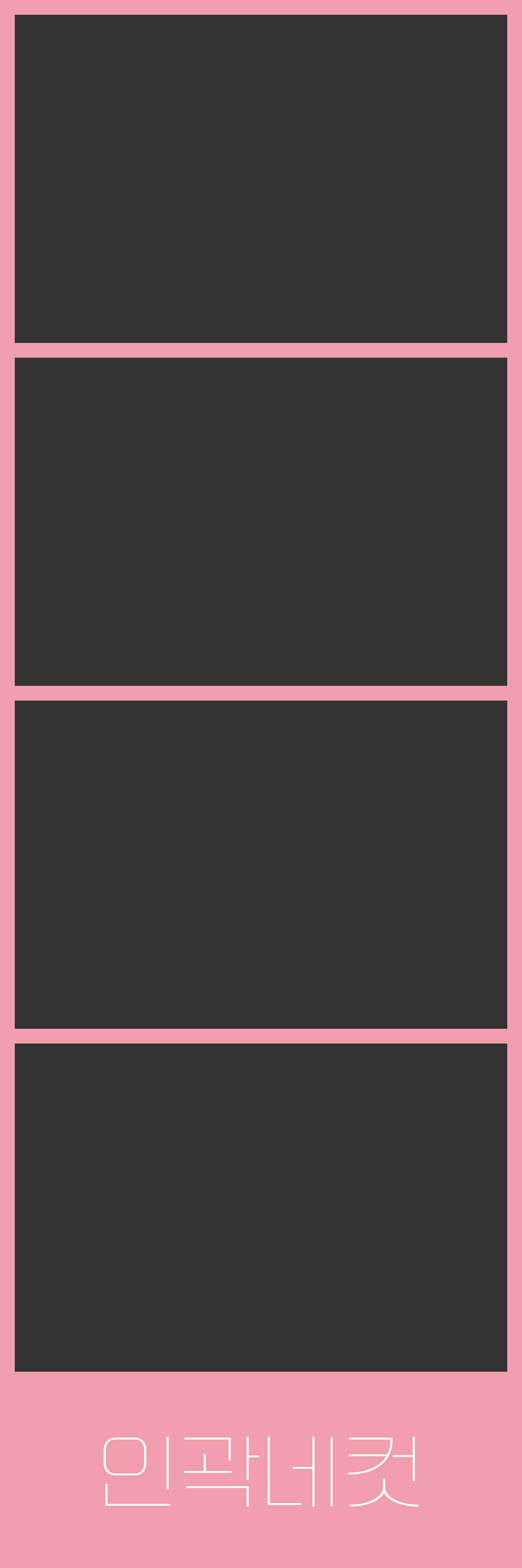
<style>
.page{position:relative;width:522px;height:1568px;background:#333333}
.page>*{position:absolute;margin:0}
.t1{font:82px "RixWhiteSansWhite";color:#ffffff}
</style>
<div class="page">
<p class="t1" style="left:103px;top:1437px;width:315px;height:70px">인곽네컷</p>
</div>
